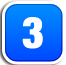
<style>
.page{position:relative;width:66px;height:65px;background:#ffffff}
.page>*{position:absolute;margin:0}
.t1{font:42px "AcmoDisplaySSiNormal";color:#ffffff}
</style>
<div class="page">
<p class="t1" style="left:22px;top:17px;width:21px;height:32px">3</p>
</div>
